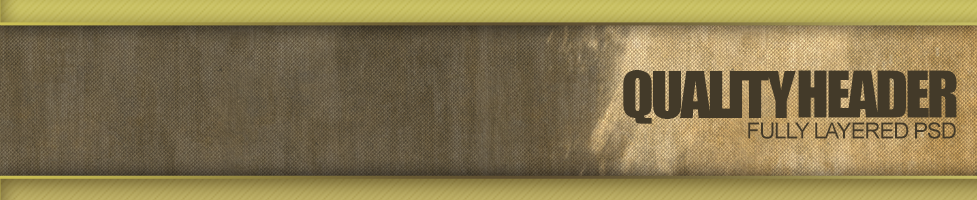
<style>
.page{position:relative;width:977px;height:200px}
.page>*{position:absolute;margin:0}
.t1{font:59.5px "Impact";letter-spacing:-0.05em;color:#433a29;text-transform:uppercase}
.t2{font:22.3px "ArialMT";letter-spacing:-0.05em;color:#433a29;text-transform:uppercase}
</style>
<div class="page">
<p class="t1" style="left:623px;top:70px;width:173px;height:54px">quality</p>
<p class="t1" style="left:798px;top:70px;width:159px;height:48px">header</p>
<p class="t2" style="left:748px;top:122px;width:208px;height:17px">fully layered psd</p>
</div>
